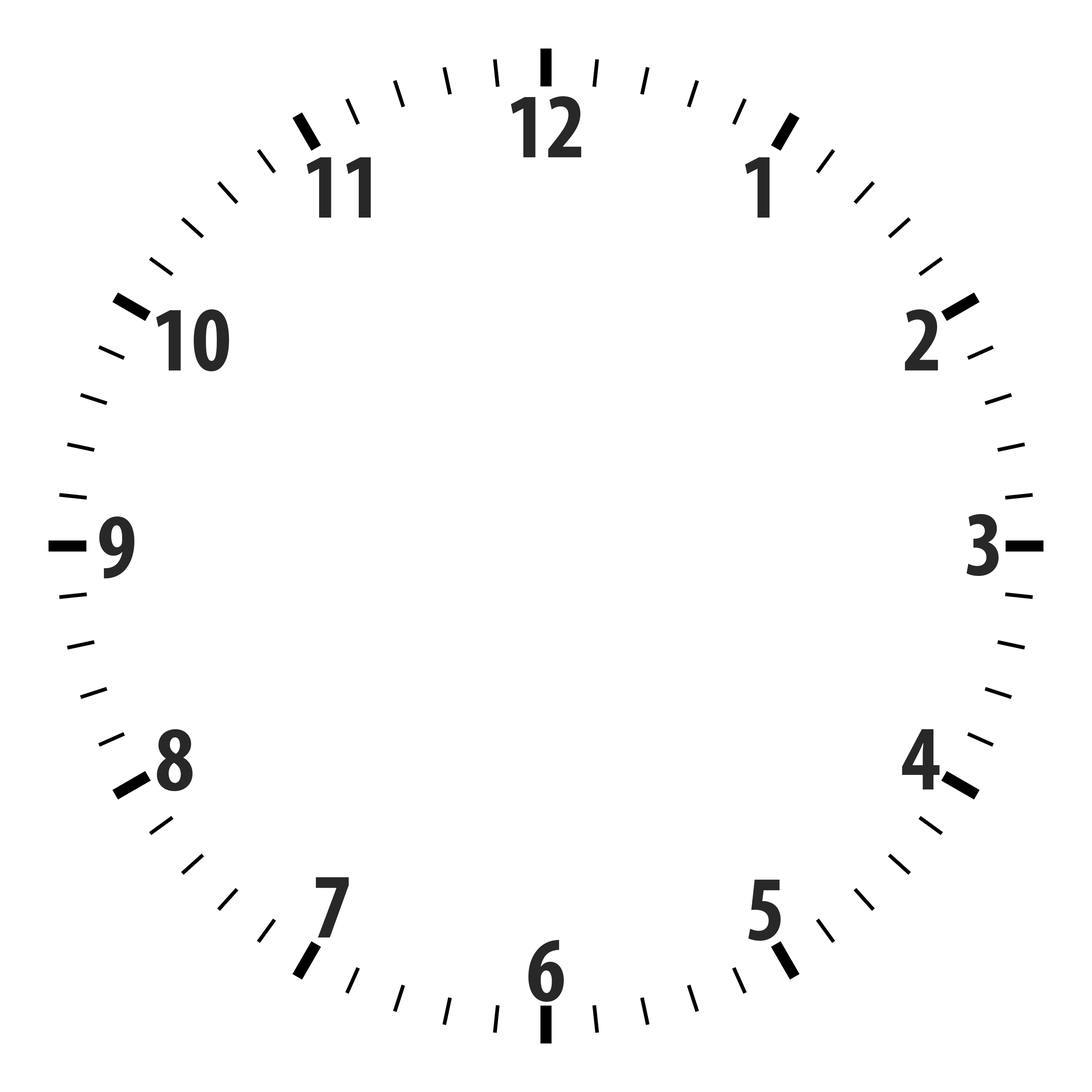
<style>
.page{position:relative;width:1092px;height:1092px;background:#ffffff}
.page>*{position:absolute;margin:0}
.t1{font:92.7px "MyriadPro-BoldCond";color:#282828}
</style>
<div class="page">
<p class="t1" style="left:511px;top:96px;width:71px;height:61px">12</p>
<p class="t1" style="left:307px;top:157px;width:64px;height:61px">11</p>
<p class="t1" style="left:745px;top:157px;width:25px;height:61px">1</p>
<p class="t1" style="left:156px;top:309px;width:73px;height:63px">10</p>
<p class="t1" style="left:905px;top:309px;width:33px;height:61px">2</p>
<p class="t1" style="left:99px;top:516px;width:36px;height:62px">9</p>
<p class="t1" style="left:966px;top:514px;width:33px;height:62px">3</p>
<p class="t1" style="left:157px;top:729px;width:36px;height:62px">8</p>
<p class="t1" style="left:902px;top:729px;width:38px;height:60px">4</p>
<p class="t1" style="left:316px;top:877px;width:33px;height:60px">7</p>
<p class="t1" style="left:748px;top:879px;width:33px;height:62px">5</p>
<p class="t1" style="left:528px;top:940px;width:36px;height:62px">6</p>
</div>
